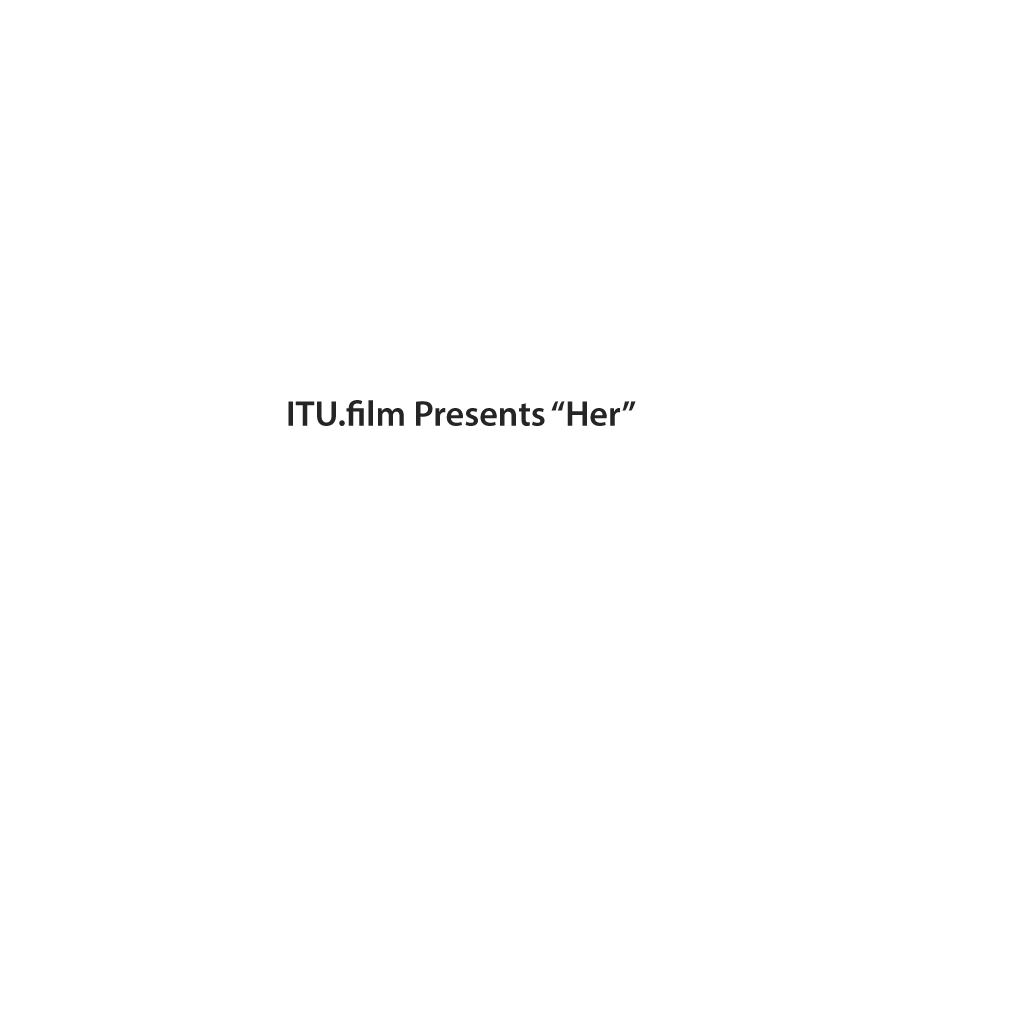
<style>
.page{position:relative;width:1020px;height:1020px;background:#ffffff}
.page>*{position:absolute;margin:0}
.t1{font:36px "MyriadPro-Semibold";color:#252525}
</style>
<div class="page">
<p class="t1" style="left:288px;top:400px;width:348px;height:26px">ITU.film Presents “Her”</p>
</div>
